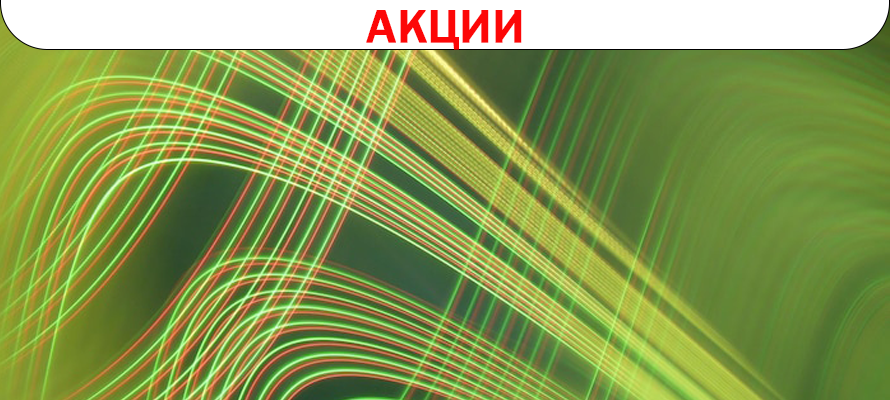
<style>
.page{position:relative;width:890px;height:400px}
.page>*{position:absolute;margin:0}
.t1{font:48px "FranklinGothic-Medium";color:#fc0707;text-transform:uppercase;font-weight:bold}
</style>
<div class="page">
<p class="t1" style="left:366px;top:10px;width:156px;height:40px">АКЦИИ</p>
</div>
